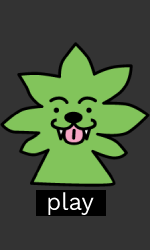
<style>
.page{position:relative;width:150px;height:250px;background:#333333}
.page>*{position:absolute;margin:0}
.t1{font:24px "WorkSans-Regular";color:#ffffff}
</style>
<div class="page">
<p class="t1" style="left:48px;top:192px;width:46px;height:23px">play</p>
</div>
